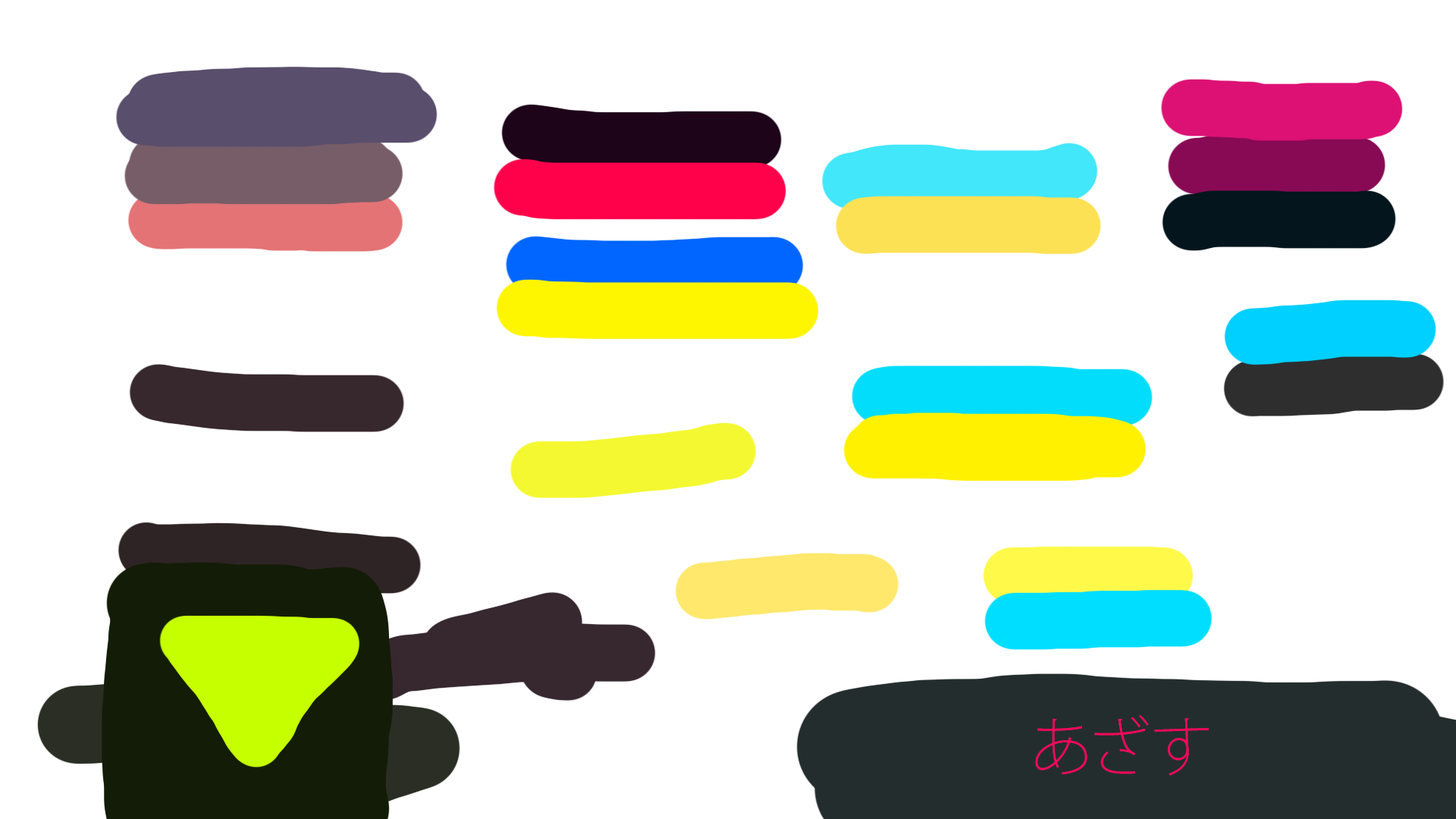
<style>
.page{position:relative;width:1456px;height:819px;background:#ffffff}
.page>*{position:absolute;margin:0}
.t1{font:63.1px "KozGoPr6N-ExtraLight";letter-spacing:-0.03em;color:#fc055c}
</style>
<div class="page">
<p class="t1" style="left:1035px;top:715px;width:174px;height:61px">あざす</p>
</div>
